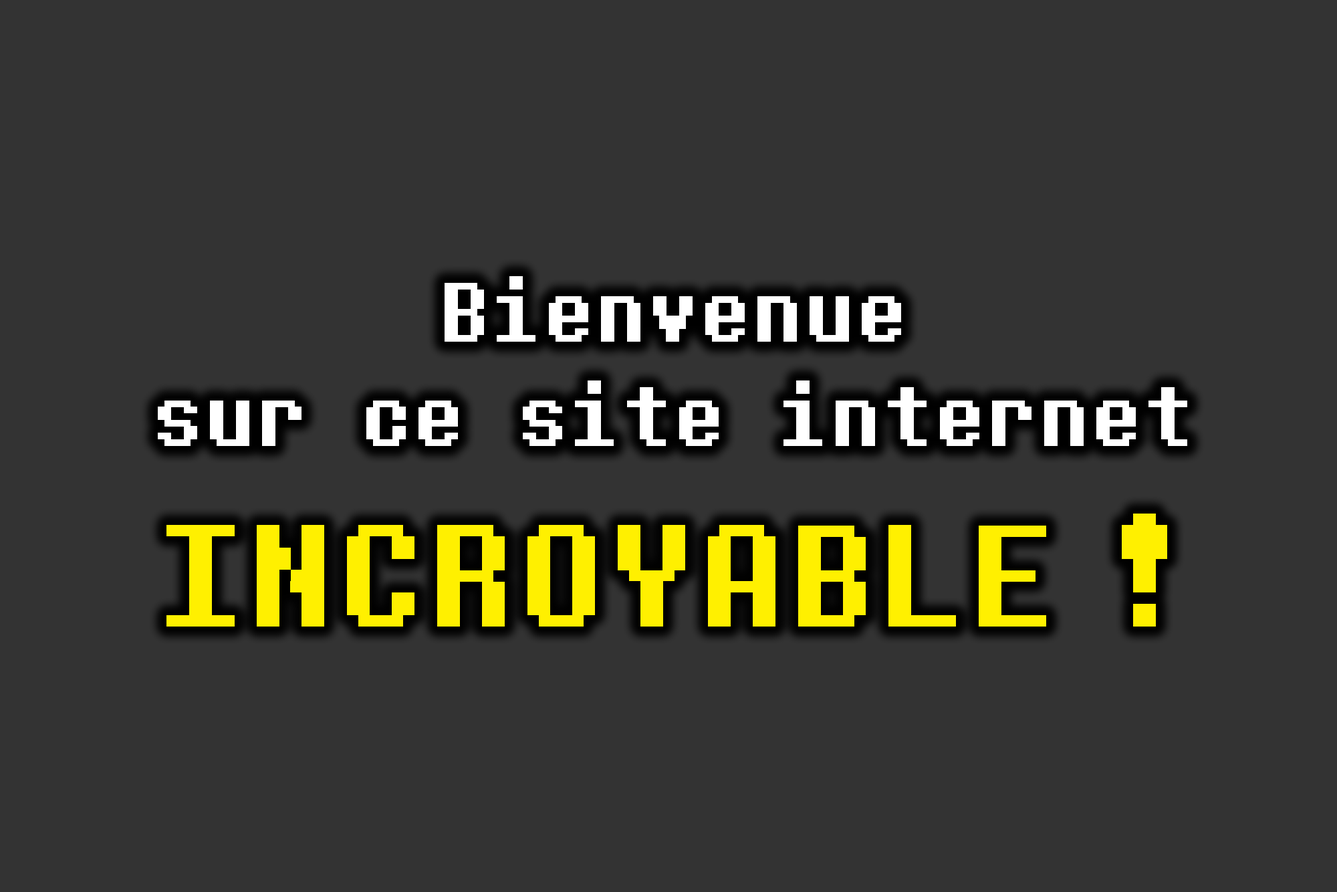
<style>
.page{position:relative;width:1337px;height:892px;background:#333333}
.page>*{position:absolute;margin:0}
.t1{font:86.9px "DeterminationMono";color:#ffffff}
.t2{font:150.4px "DeterminationMono";color:#fff000;text-transform:uppercase}
</style>
<div class="page">
<p class="t1" style="left:158px;top:276px;width:1029px;height:350px;text-align:center">Bienvenue<br>sur ce site internet<br><span class="t2">INCROYABLE !</span></p>
</div>
